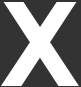
<style>
.page{position:relative;width:81px;height:87px;background:#333333}
.page>*{position:absolute;margin:0}
.t1{font:117.5px "Arial-BoldMT";color:#ffffff}
</style>
<div class="page">
<p class="t1" style="left:0px;top:2px;width:79px;height:84px">X</p>
</div>
